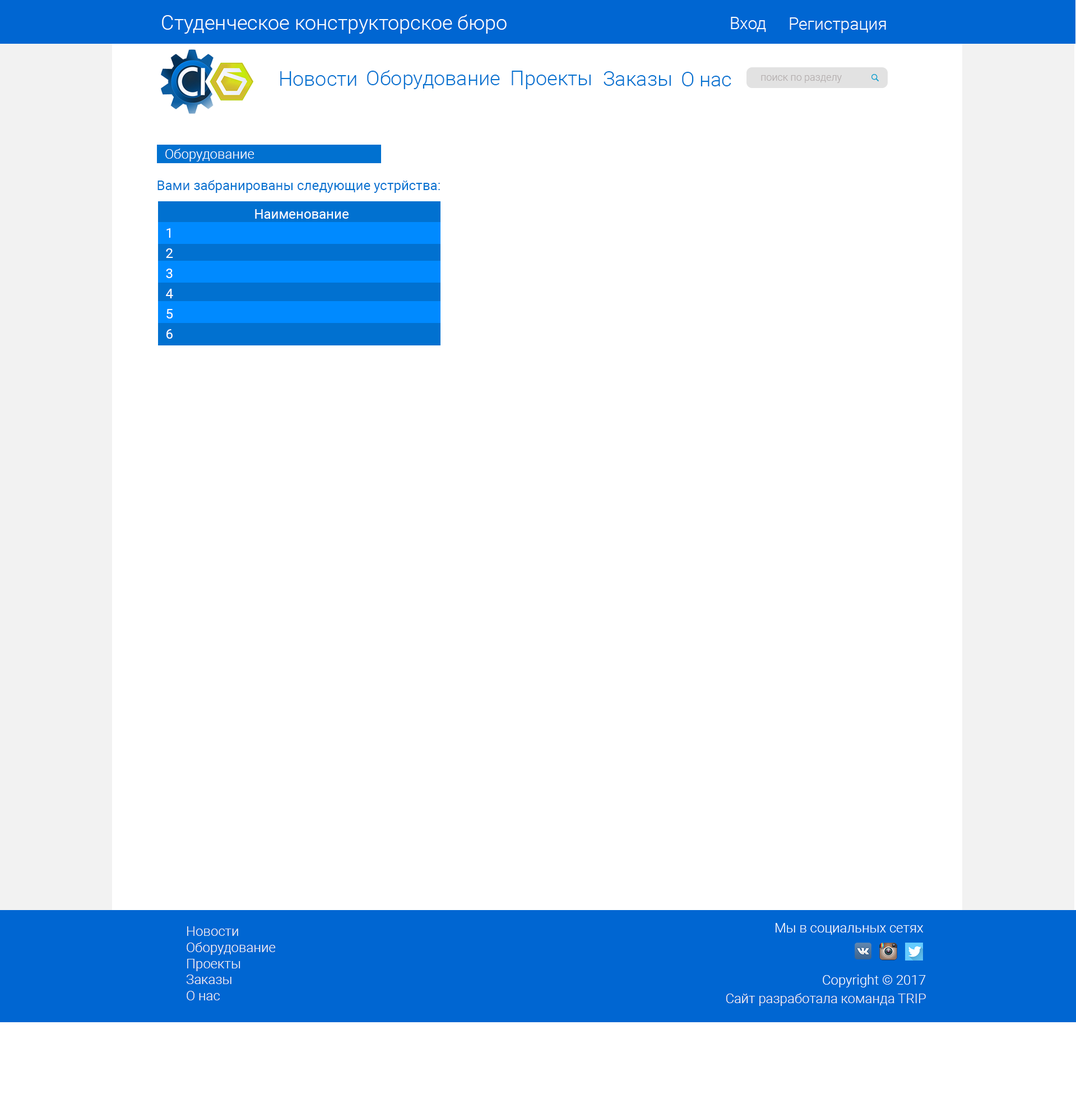
<style>
.page{position:relative;width:1076px;height:1108px;background:#ffffff}
.page>*{position:absolute;margin:0}
.t1{font:20.2px "Roboto-Light";color:#f8fdff}
.t2{font:16.8px "Roboto-Light";color:#f8fdff}
.t3{font:20.2px "Roboto-Light";color:#0171d0}
.t4{font:10.1px "Roboto-Light";color:#b3adad}
.t5{font:13.5px "Roboto-Light";color:#ffffff}
.t6{font:13.5px "Roboto-Regular";color:#0171d0}
.t7{font:13.5px "Roboto-Regular";color:#ffffff}
.t8{font:13.5px/20.2px "Roboto-Regular";color:#ffffff}
.t9{font:13.5px "Roboto-Light";color:#f8f3f3}
.t10{font:13.5px "Roboto-Light";color:#f8fdff}
</style>
<div class="page">
<p class="t1" style="left:162px;top:15px;width:345px;height:19px">Студенческое конструкторское бюро</p>
<p class="t2" style="left:731px;top:17px;width:35px;height:15px">Вход</p>
<p class="t2" style="left:790px;top:17px;width:96px;height:16px">Регистрация</p>
<p class="t3" style="left:280px;top:71px;width:77px;height:15px">Новости</p>
<p class="t3" style="left:367px;top:70px;width:133px;height:19px">Оборудование</p>
<p class="t3" style="left:512px;top:71px;width:79px;height:18px">Проекты</p>
<p class="t3" style="left:604px;top:71px;width:67px;height:15px">Заказы</p>
<p class="t3" style="left:682px;top:72px;width:50px;height:14px">О нас</p>
<p class="t4" style="left:761px;top:75px;width:81px;height:8px">поиск по разделу</p>
<p class="t5" style="left:165px;top:149px;width:90px;height:12px">Оборудование</p>
<p class="t6" style="left:158px;top:180px;width:282px;height:13px">Вами забранированы следующие устрйства:</p>
<p class="t7" style="left:255px;top:209px;width:94px;height:10px">Наименование</p>
<p class="t8" style="left:166px;top:228px;width:7px;height:111px;text-align:center">1<br>2<br>3<br>4<br>5<br>6</p>
<p class="t9" style="left:187px;top:926px;width:89px;height:74px">Новости<br>Оборудование<br>Проекты<br>Заказы<br>О нас</p>
<p class="t10" style="left:776px;top:923px;width:148px;height:12px">Мы в социальных сетях</p>
<p class="t10" style="left:823px;top:974px;width:103px;height:13px">Copyright © 2017</p>
<p class="t9" style="left:726px;top:993px;width:200px;height:13px">Сайт разработала команда TRIP</p>
</div>
